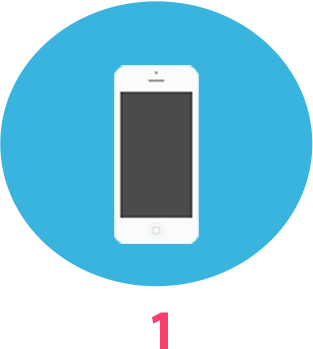
<style>
.page{position:relative;width:313px;height:349px;background:#38b4de}
.page>*{position:absolute;margin:0}
.t1{font:60px "MyriadPro-BoldCond";color:#fa3e6e}
</style>
<div class="page">
<p class="t1" style="left:152px;top:312px;width:16px;height:37px">1</p>
</div>
